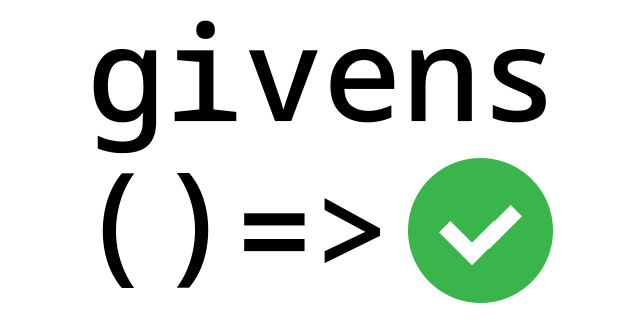
<style>
.page{position:relative;width:640px;height:320px;background:#ffffff}
.page>*{position:absolute;margin:0}
.t1{font:131.1px "NotoSansMono-Medium";color:#000000}
</style>
<div class="page">
<p class="t1" style="left:93px;top:20px;width:453px;height:134px">givens</p>
<p class="t1" style="left:102px;top:173px;width:107px;height:115px">()</p>
<p class="t1" style="left:244px;top:198px;width:137px;height:66px">=&gt;</p>
</div>
